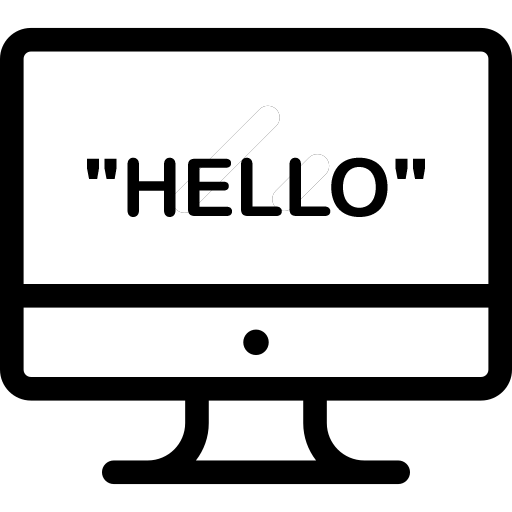
<style>
.page{position:relative;width:512px;height:512px;background:#ffffff}
.page>*{position:absolute;margin:0}
.t1{font:80px "ArialRoundedMTBold";color:#000000}
</style>
<div class="page">
<p class="t1" style="left:87px;top:157px;width:338px;height:60px">"HELLO"</p>
</div>
